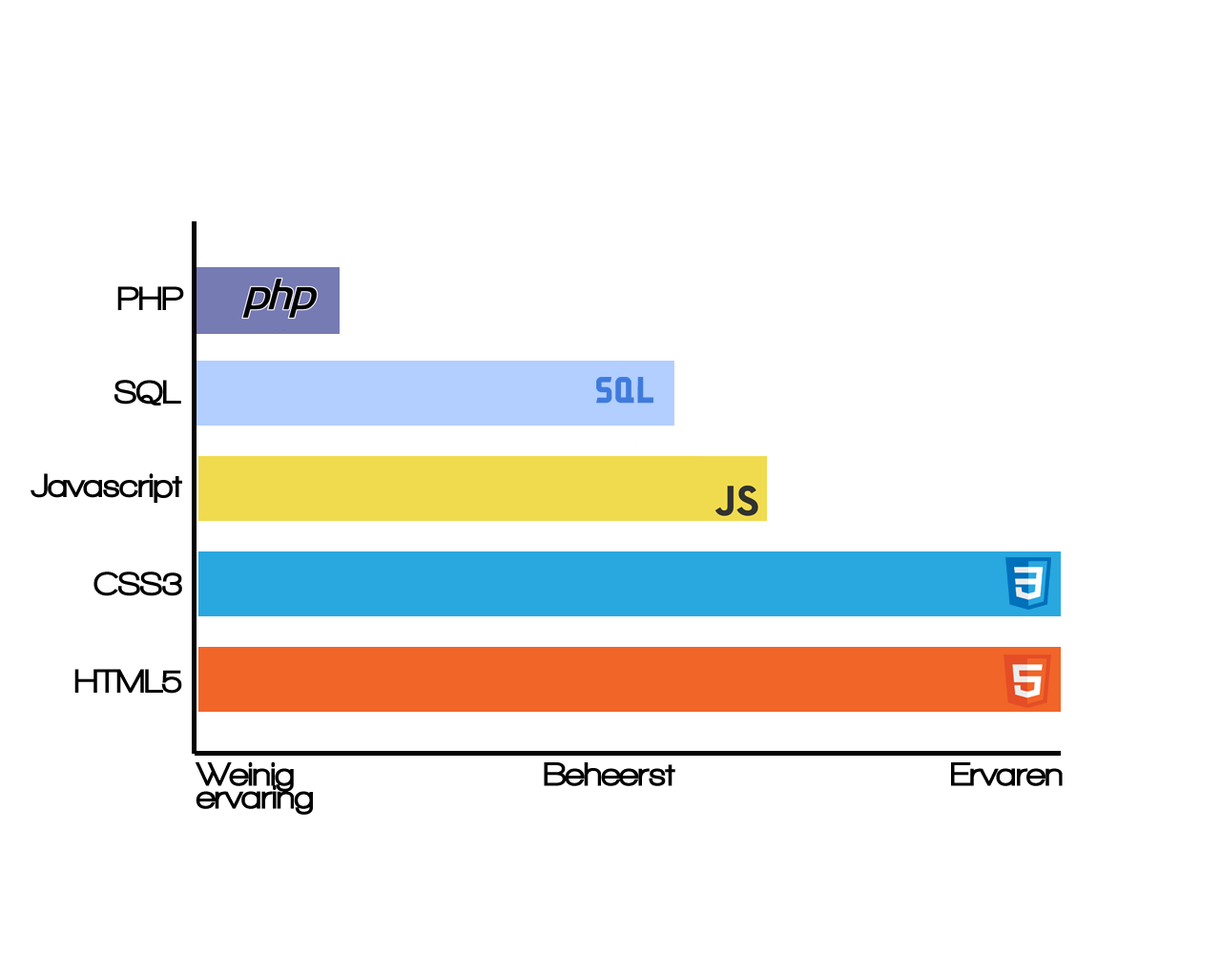
<style>
.page{position:relative;width:1221px;height:977px;background:#ffffff}
.page>*{position:absolute;margin:0}
.t1{font:34.3px "WalkwayBlack";color:#000000}
.t2{font:34.3px/22.9px "WalkwayBlack";color:#000000}
</style>
<div class="page">
<p class="t1" style="left:117px;top:286px;width:67px;height:24px">PHP</p>
<p class="t1" style="left:114px;top:380px;width:67px;height:25px">SQL</p>
<p class="t1" style="left:31px;top:473px;width:151px;height:30px">Javascript</p>
<p class="t1" style="left:93px;top:571px;width:89px;height:25px">CSS3</p>
<p class="t1" style="left:74px;top:669px;width:108px;height:24px">HTML5</p>
<p class="t2" style="left:195px;top:761px;width:118px;height:54px">Weinig <br>ervaring</p>
<p class="t1" style="left:544px;top:762px;width:131px;height:24px">Beheerst</p>
<p class="t1" style="left:951px;top:762px;width:112px;height:24px">Ervaren</p>
</div>
